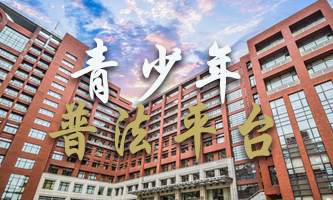
<style>
.page{position:relative;width:333px;height:200px}
.page>*{position:absolute;margin:0}
.t1{font:66px "STXingkai";letter-spacing:-0.005em;color:#f2f8f8;font-weight:bold;scale:0.91 1}
.t2{font:66px "STXingkai";letter-spacing:-0.005em;color:#c1af68;font-weight:bold;scale:0.91 1}
</style>
<div class="page">
<p class="t1" style="left:70px;top:38px;width:171px;height:66px">青少年</p>
<p class="t2" style="left:49px;top:99px;width:225px;height:62px">普法平台</p>
</div>
